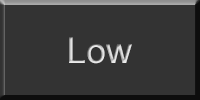
<style>
.page{position:relative;width:200px;height:100px;background:#333333}
.page>*{position:absolute;margin:0}
.t1{font:36px "ArialMT";color:#dddddd}
</style>
<div class="page">
<p class="t1" style="left:69px;top:37px;width:63px;height:27px">Low</p>
</div>
